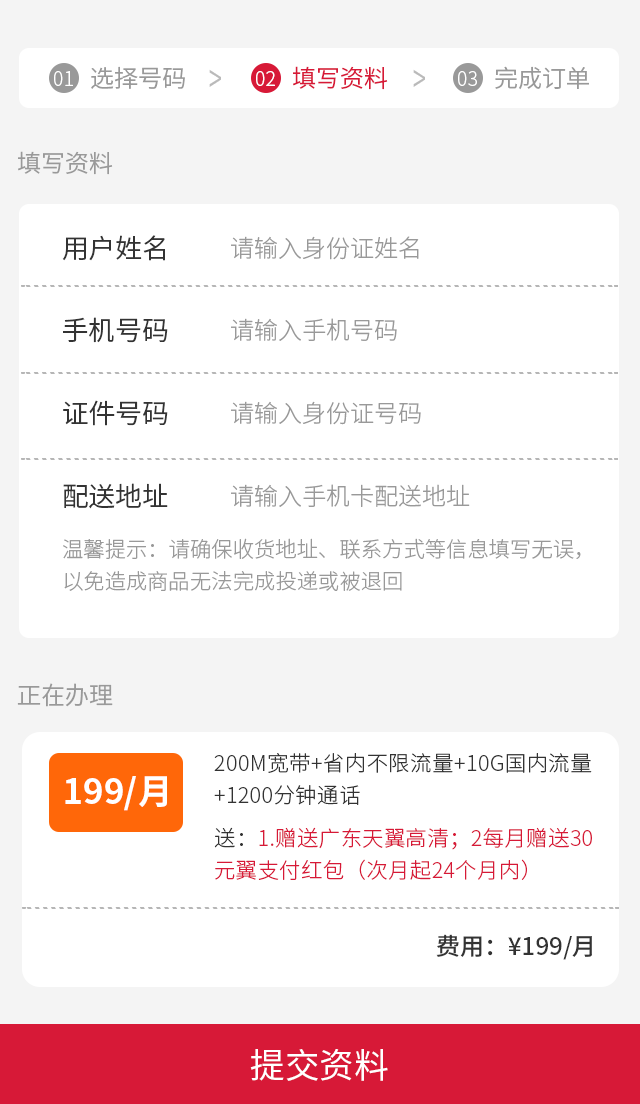
<style>
.page{position:relative;width:640px;height:1104px;background:#ffffff}
.page>*{position:absolute;margin:0}
.t1{font:19.5px "SourceHanSansCN-Light";color:#ffffff}
.t2{font:24px "SourceHanSansCN-Normal";color:#999999}
.t3{font:39.3px "SourceHanSansCN-Normal";color:#bbbbbb;scale:0.61 1}
.t4{font:24px "SourceHanSansCN-Normal";color:#d71937}
.t5{font:26.7px/82.7px "SourceHanSansCN-Normal";color:#333333}
.t6{font:24px/82.7px "SourceHanSansCN-Light";color:#999999}
.t7{font:21.3px/32px "SourceHanSansCN-Light";color:#999999}
.t8{font:21.3px/32px "SourceHanSansCN-Light";letter-spacing:0.025em;color:#333333}
.t9{font:34.7px "SourceHanSansCN-Bold";color:#ffffff}
.t10{font:21.3px/32px "SourceHanSansCN-Light";letter-spacing:0.02em;color:#d71937}
.t11{font:21.3px/32px "SourceHanSansCN-Light";letter-spacing:0.02em;color:#333333}
.t12{font:24px "SourceHanSansCN-Medium";color:#333333}
.t13{font:34.7px "SourceHanSansCN-Regular";color:#ffffff}
</style>
<div class="page">
<p class="t1" style="left:54px;top:71px;width:19px;height:15px">01</p>
<p class="t2" style="left:91px;top:66px;width:94px;height:23px">选择号码</p>
<p class="t3" style="left:209px;top:69px;width:12px;height:18px">&gt;</p>
<p class="t1" style="left:256px;top:71px;width:19px;height:15px">02</p>
<p class="t4" style="left:293px;top:66px;width:95px;height:24px">填写资料</p>
<p class="t3" style="left:413px;top:69px;width:12px;height:18px">&gt;</p>
<p class="t1" style="left:458px;top:71px;width:19px;height:15px">03</p>
<p class="t2" style="left:495px;top:66px;width:94px;height:24px">完成订单</p>
<p class="t2" style="left:18px;top:151px;width:95px;height:24px">填写资料</p>
<p class="t5" style="left:62px;top:235px;width:106px;height:274px">用户姓名<br>手机号码<br>证件号码<br>配送地址</p>
<p class="t6" style="left:231px;top:236px;width:239px;height:271px">请输入身份证姓名<br>请输入手机号码<br>请输入身份证号码<br>请输入手机卡配送地址</p>
<p class="t7" style="left:63px;top:538px;width:518px;height:54px">温馨提示：请确保收货地址、联系方式等信息填写无误，<br>以免造成商品无法完成投递或被退回</p>
<p class="t2" style="left:17px;top:683px;width:96px;height:24px">正在办理</p>
<p class="t8" style="left:214px;top:753px;width:378px;height:52px">200M宽带+省内不限流量+10G国内流量<br>+1200分钟通话</p>
<p class="t9" style="left:65px;top:776px;width:102px;height:35px">199/月</p>
<p class="t10" style="left:214px;top:827px;width:378px;height:53px"><span class="t11">送：</span>1.赠送广东天翼高清；2每月赠送30<br>元翼支付红包（次月起24个月内）</p>
<p class="t12" style="left:436px;top:934px;width:156px;height:26px">费用：¥199/月</p>
<p class="t13" style="left:250px;top:1049px;width:138px;height:32px">提交资料</p>
</div>
